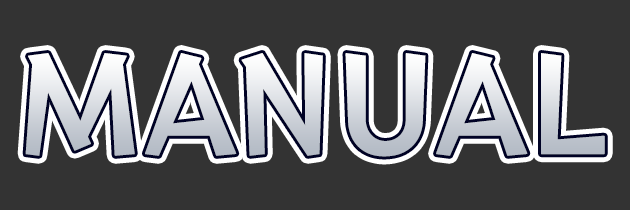
<style>
.page{position:relative;width:630px;height:210px;background:#333333}
.page>*{position:absolute;margin:0}
.t1{font:125px "RocknRollOne-Regular";font-weight:bold}
</style>
<div class="page">
<p class="t1" style="left:25px;top:53px;width:580px;height:104px">MANUAL</p>
</div>
